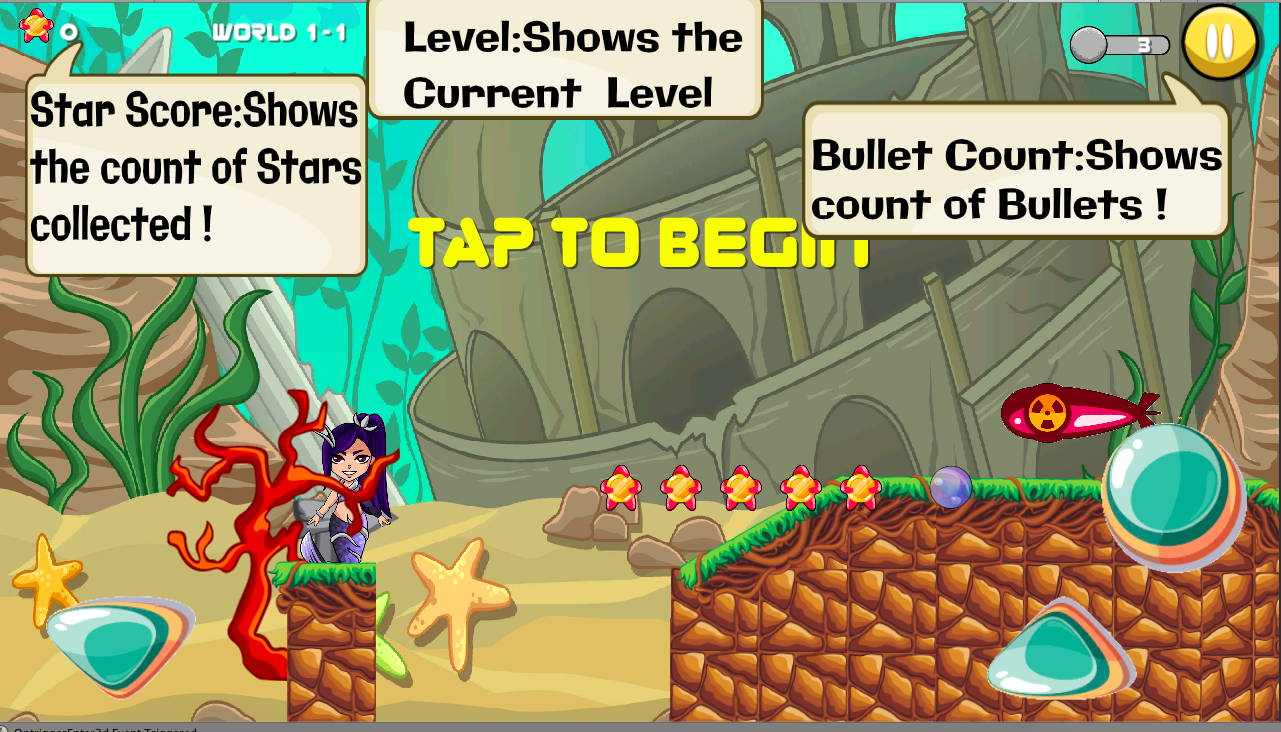
<style>
.page{position:relative;width:1281px;height:732px}
.page>*{position:absolute;margin:0}
.t1{font:41px "Galindo-Regular";color:#000000}
.t2{font:47.5px "Galindo-Regular";color:#000000;scale:0.73 1}
</style>
<div class="page">
<p class="t1" style="left:404px;top:20px;width:339px;height:89px">Level:Shows the <br>Current  Level</p>
<p class="t2" style="left:30px;top:90px;width:332px;height:152px">Star Score:Shows <br>the count of Stars<br>collected !</p>
<p class="t1" style="left:812px;top:138px;width:410px;height:82px">Bullet Count:Shows<br>count of Bullets !</p>
</div>
